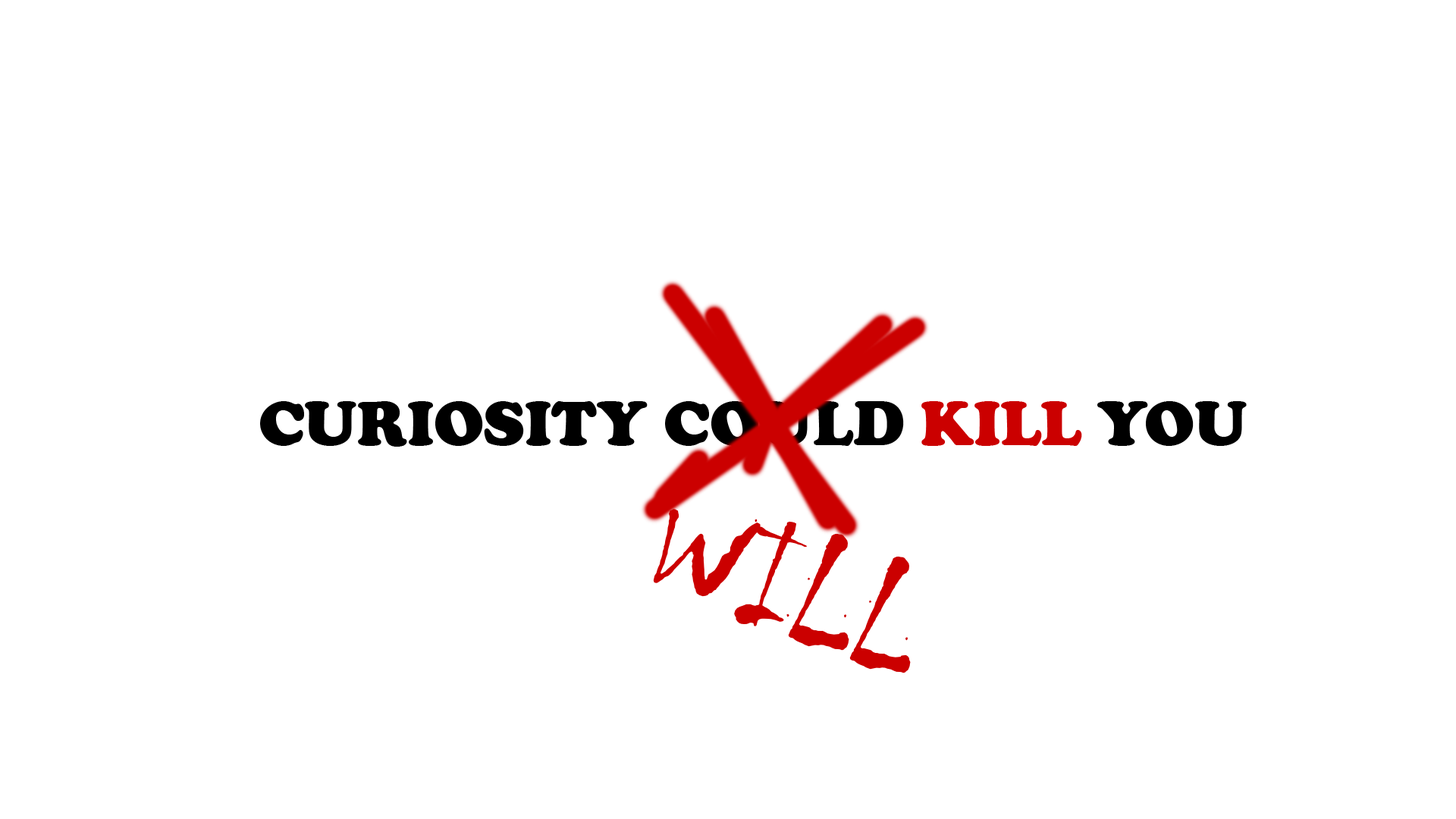
<style>
.page{position:relative;width:1456px;height:819px;background:#ffffff}
.page>*{position:absolute;margin:0}
.t1{font:9.1px "CooperBlack";color:#000000}
.t2{font:9.1px "CooperBlack";color:#cb0000}
.t3{font:160.5px "Chiller-Regular";color:#cb0000}
</style>
<div class="page">
<p class="t1" style="left:260px;top:401px;width:987px;height:46px">CURIOSITY COULD <span class="t2">KILL</span> YOU</p>
<p class="t3" style="left:653px;top:509px;width:258px;height:164px;rotate:21deg">WILL</p>
</div>
